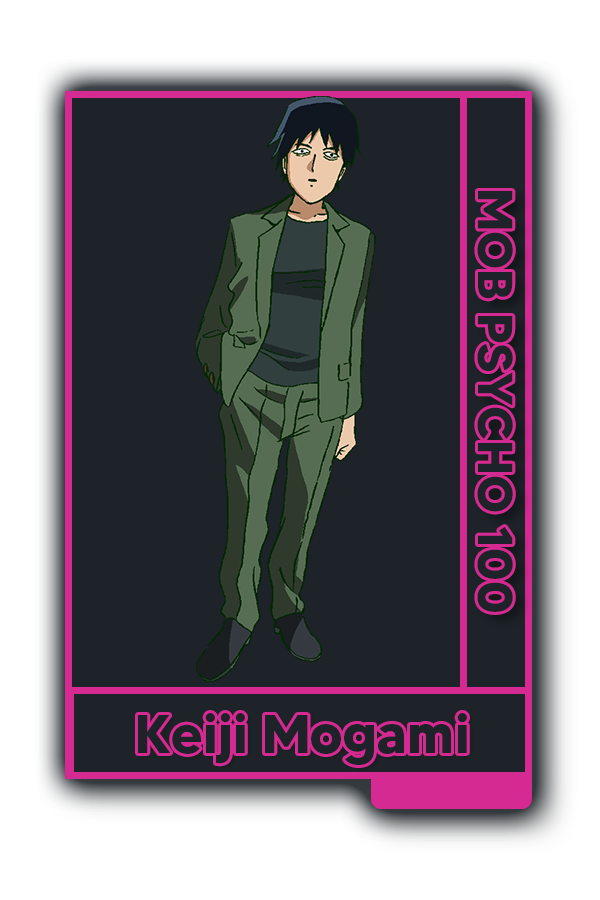
<style>
.page{position:relative;width:600px;height:900px;background:#1d2328}
.page>*{position:absolute;margin:0}
.t1{font:48.8px "MADETOMMY-Bold";color:#1d2328}
.t2{font:54.6px "MADETOMMY-Bold";color:#1d2328}
</style>
<div class="page">
<p class="t1" style="left:477px;top:191px;width:36px;height:421px;rotate:90deg">MOB PSYCHO 100</p>
<p class="t2" style="left:138px;top:713px;width:329px;height:52px">Keiji Mogami</p>
</div>
